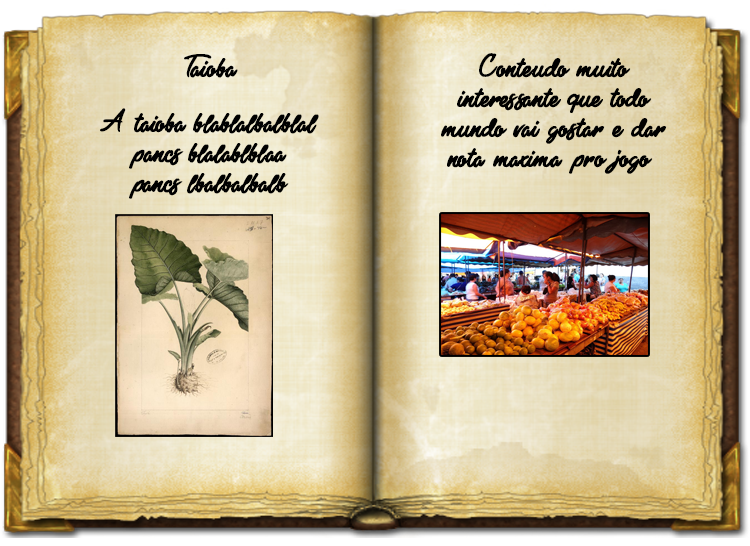
<style>
.page{position:relative;width:750px;height:546px}
.page>*{position:absolute;margin:0}
.t1{font:25px "BlackFreeday";color:#000000;font-weight:bold}
</style>
<div class="page">
<p class="t1" style="left:184px;top:54px;width:54px;height:24px">Taioba</p>
<p class="t1" style="left:441px;top:53px;width:226px;height:121px;text-align:center">Conteúúudo muito interessante que todo mundo vai gostar e dar nota 1maxima pro jogo :</p>
<p class="t1" style="left:100px;top:108px;width:219px;height:91px;text-align:center">A taioba blablalbalblal<br>pancs blalablblaa<br>pancs lbalbalbalb</p>
</div>
